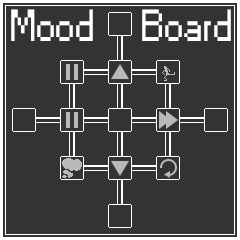
<style>
.page{position:relative;width:240px;height:240px;background:#333333}
.page>*{position:absolute;margin:0}
.t1{font:72px "Small Fonts";color:#ffffff}
</style>
<div class="page">
<p class="t1" style="left:11px;top:9px;width:220px;height:32px">Mood       Board</p>
</div>
